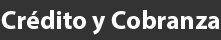
<style>
.page{position:relative;width:221px;height:40px;background:#333333}
.page>*{position:absolute;margin:0}
.t1{font:26px "MyriadPro-Bold";color:#ffffff}
</style>
<div class="page">
<p class="t1" style="left:1px;top:10px;width:219px;height:25px">Crédito y Cobranza</p>
</div>
